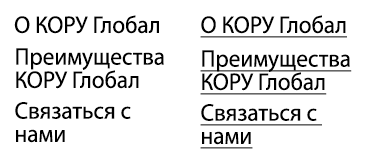
<style>
.page{position:relative;width:372px;height:150px;background:#ffffff}
.page>*{position:absolute;margin:0}
.t1{font:24px "MyriadPro-Regular";color:#000000;scale:0.97 1}
.t2{font:24px "MyriadPro-Regular";color:#000000;text-decoration:underline;scale:0.97 1}
.t3{font:24px/23.2px "MyriadPro-Regular";color:#000000;scale:0.97 1}
.t4{font:24px/23.2px "MyriadPro-Regular";color:#000000;text-decoration:underline;scale:0.97 1}
</style>
<div class="page">
<p class="t1" style="left:14px;top:15px;width:145px;height:19px">О КОРУ Глобал</p>
<p class="t2" style="left:200px;top:15px;width:147px;height:23px">О КОРУ Глобал</p>
<p class="t3" style="left:16px;top:48px;width:148px;height:41px">Преимущества КОРУ Глобал</p>
<p class="t4" style="left:200px;top:50px;width:152px;height:45px">Преимущества КОРУ Глобал</p>
<p class="t3" style="left:15px;top:102px;width:116px;height:41px">Связаться с <br>нами</p>
<p class="t4" style="left:200px;top:104px;width:122px;height:45px">Связаться с <br>нами</p>
</div>
